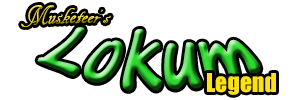
<style>
.page{position:relative;width:300px;height:100px;background:#ffffff}
.page>*{position:absolute;margin:0}
.t1{font:24px "ARDECODE"}
.t2{font:72px "ARCENA"}
.t3{font:24px "Impact";color:#ffe400}
</style>
<div class="page">
<p class="t1" style="left:21px;top:5px;width:90px;height:22px">Musketeer’s</p>
<p class="t2" style="left:37px;top:27px;width:224px;height:64px">Lokum</p>
<p class="t3" style="left:207px;top:73px;width:69px;height:22px">Legend</p>
</div>
